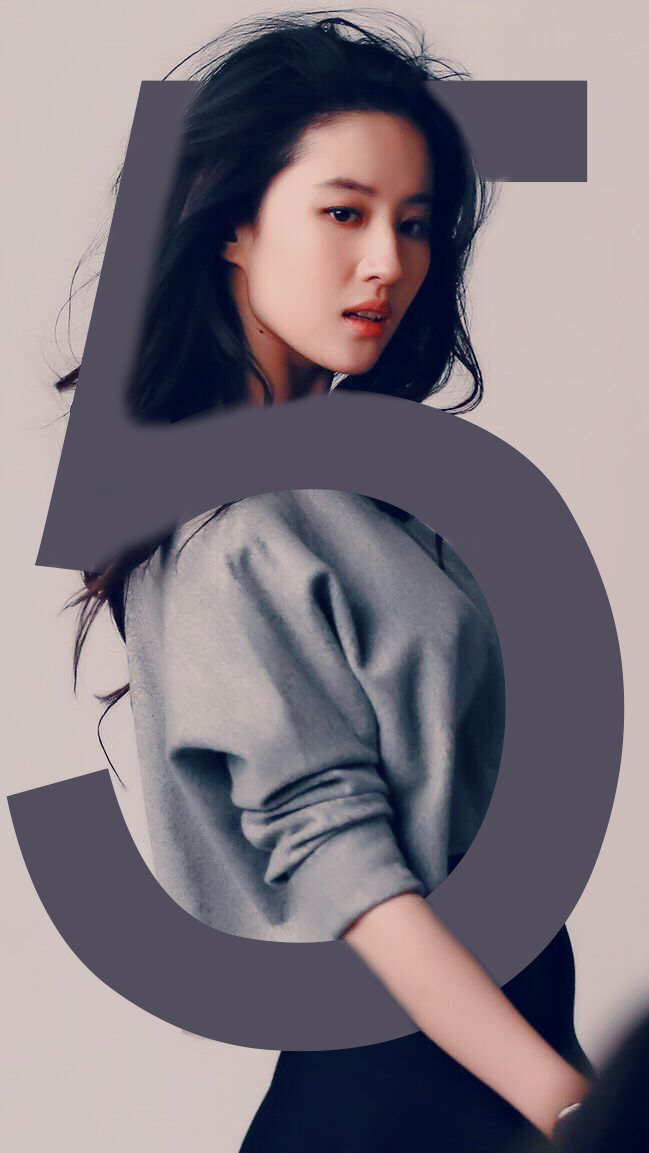
<style>
.page{position:relative;width:649px;height:1153px;background:#524e5e}
.page>*{position:absolute;margin:0}
.t1{font:1443.4px "SimHei";letter-spacing:0.18em;color:#524e5e}
</style>
<div class="page">
<p class="t1" style="left:6px;top:80px;width:619px;height:972px">5</p>
</div>
